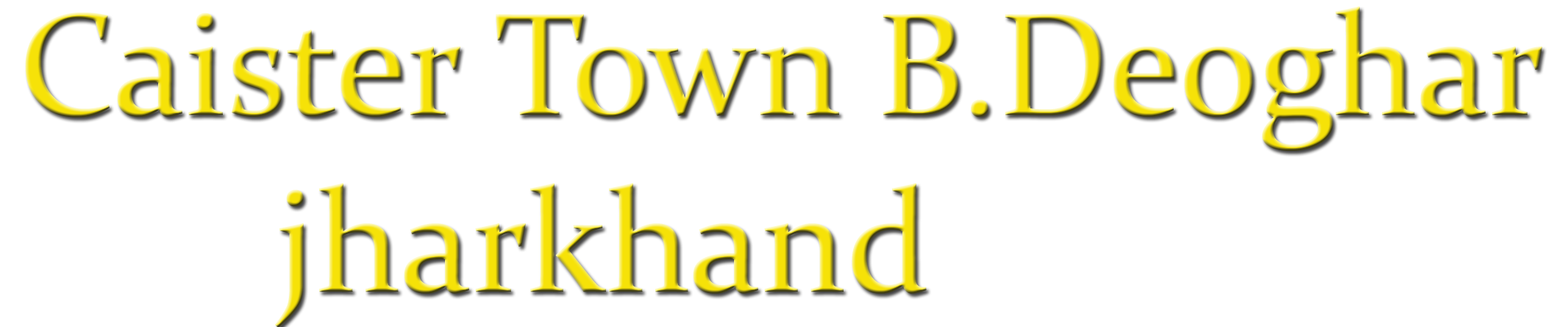
<style>
.page{position:relative;width:1568px;height:327px;background:#ffffff}
.page>*{position:absolute;margin:0}
.t1{font:147.1px "Constantia"}
</style>
<div class="page">
<p class="t1" style="left:25px;top:6px;width:1517px;height:321px">Caister Town B.Deoghar<br>       jharkhand</p>
</div>
